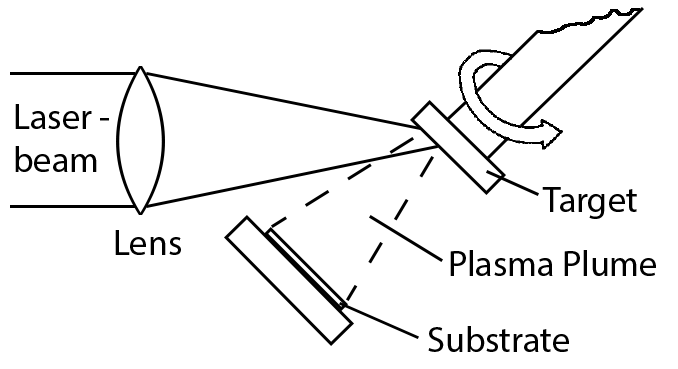
<style>
.page{position:relative;width:678px;height:369px;background:#ffffff}
.page>*{position:absolute;margin:0}
.t1{font:36px "MyriadPro-Regular";color:#000000}
</style>
<div class="page">
<p class="t1" style="left:15px;top:104px;width:94px;height:68px">Laser -<br>beam</p>
<p class="t1" style="left:542px;top:187px;width:95px;height:32px">Target</p>
<p class="t1" style="left:115px;top:230px;width:66px;height:25px">Lens</p>
<p class="t1" style="left:450px;top:250px;width:206px;height:26px">Plasma Plume</p>
<p class="t1" style="left:428px;top:326px;width:141px;height:26px">Substrate</p>
</div>
